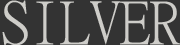
<style>
.page{position:relative;width:180px;height:45px;background:#333333}
.page>*{position:absolute;margin:0}
.t1{font:60px "MingLiU";color:#cecdc9}
</style>
<div class="page">
<p class="t1" style="left:2px;top:0px;width:178px;height:46px">SILVER</p>
</div>
